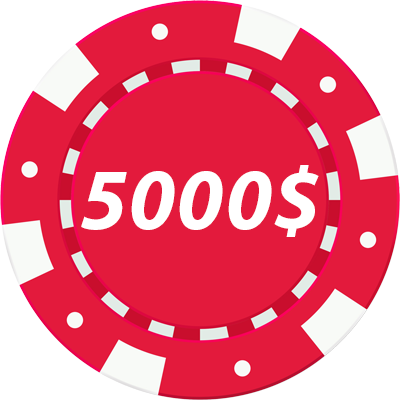
<style>
.page{position:relative;width:400px;height:400px;background:#e31a3c}
.page>*{position:absolute;margin:0}
.t1{font:87.5px "MyriadPro-BoldIt";letter-spacing:0.01em;color:#ffffff}
</style>
<div class="page">
<p class="t1" style="left:81px;top:165px;width:238px;height:72px">5000$</p>
</div>
